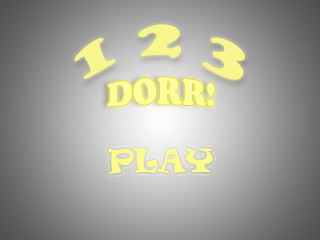
<style>
.page{position:relative;width:320px;height:240px}
.page>*{position:absolute;margin:0}
.t1{font:54px "CooperBlackStd";color:#f7f58b}
.t2{font:30px "CooperBlackStd";color:#fffd9d}
.t3{font:30px "Ravie";color:#fdfb8a}
</style>
<div class="page">
<p class="t1" style="left:74px;top:24px;width:172px;height:56px">1 2 3</p>
<p class="t2" style="left:107px;top:77px;width:108px;height:30px">DORR!</p>
<p class="t3" style="left:108px;top:148px;width:105px;height:26px">PLAY</p>
</div>
